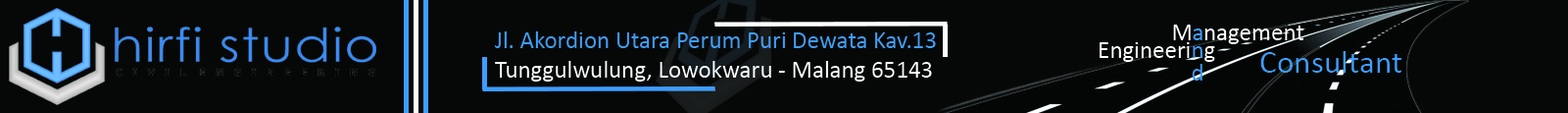
<style>
.page{position:relative;width:1568px;height:113px;background:#060808}
.page>*{position:absolute;margin:0}
.t1{font:24.5px "Calibri";color:#ffffff}
.t2{font:24.5px "Calibri";color:#3d9eff}
.t3{font:32.7px "Calibri";color:#3d9eff}
</style>
<div class="page">
<p class="t1" style="left:1173px;top:24px;width:18px;height:16px">M</p>
<p class="t2" style="left:1193px;top:28px;width:9px;height:12px">a</p>
<p class="t1" style="left:1204px;top:25px;width:100px;height:19px">nagement</p>
<p class="t2" style="left:495px;top:31px;width:441px;height:50px">Jl. Akordion Utara Perum Puri Dewata Kav.13 <br><span class="t1">Tunggulwulung, Lowokwaru - Malang 65143</span></p>
<p class="t1" style="left:1100px;top:42px;width:115px;height:20px">Engineeri<span class="t2">n</span>g</p>
<p class="t3" style="left:1260px;top:51px;width:141px;height:22px">Consultant</p>
<p class="t2" style="left:1192px;top:64px;width:10px;height:16px">d</p>
</div>
